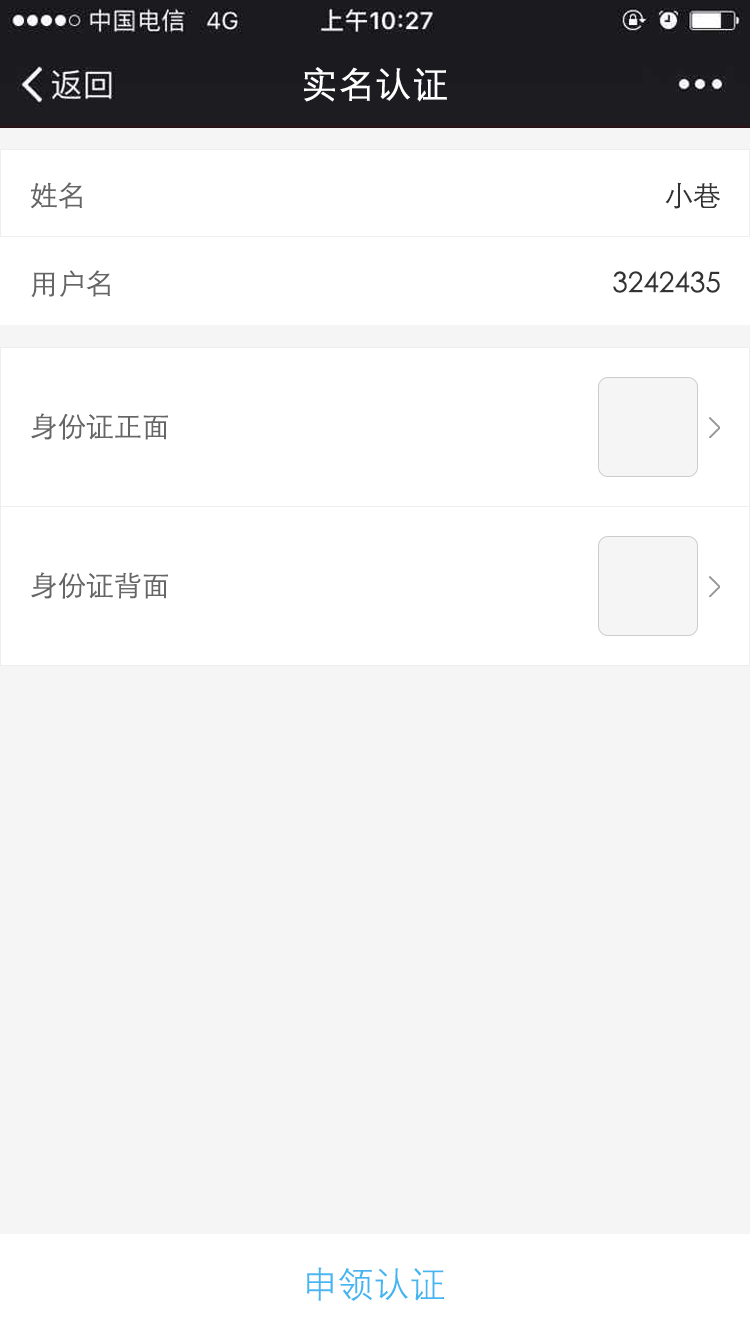
<style>
.page{position:relative;width:750px;height:1334px;background:#f5f5f5}
.page>*{position:absolute;margin:0}
.t1{font:36px "FZZDXJW--GB1-0";color:#ffffff;font-weight:bold}
.t2{font:28px "STXihei";color:#666666}
.t3{font:28px "STXihei";color:#333333}
.t4{font:36px "FZZDXJW--GB1-0";color:#43b6f2}
</style>
<div class="page">
<p class="t1" style="left:304px;top:67px;width:143px;height:35px">实名认证</p>
<p class="t2" style="left:30px;top:182px;width:52px;height:27px">姓名</p>
<p class="t3" style="left:665px;top:182px;width:56px;height:27px">小巷</p>
<p class="t2" style="left:31px;top:270px;width:79px;height:27px">用户名</p>
<p class="t3" style="left:613px;top:271px;width:107px;height:22px">3242435</p>
<p class="t2" style="left:31px;top:413px;width:137px;height:27px">身份证正面</p>
<p class="t2" style="left:31px;top:572px;width:137px;height:27px">身份证背面</p>
<p class="t4" style="left:307px;top:1267px;width:137px;height:34px">申领认证</p>
</div>
